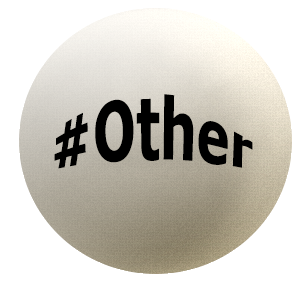
<style>
.page{position:relative;width:306px;height:290px;background:#ffffff}
.page>*{position:absolute;margin:0}
.t1{font:50px "Verdana-Bold";color:#000000}
</style>
<div class="page">
<p class="t1" style="left:54px;top:94px;width:199px;height:75px">#Other</p>
</div>
